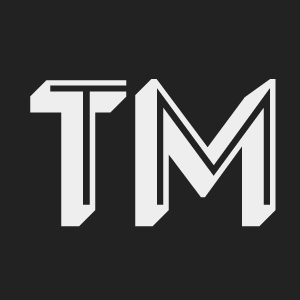
<style>
.page{position:relative;width:300px;height:300px;background:#222222}
.page>*{position:absolute;margin:0}
.t1{font:180px "Landmark-Dimensional";color:#eeeeee}
</style>
<div class="page">
<p class="t1" style="left:30px;top:79px;width:246px;height:148px">tm</p>
</div>
